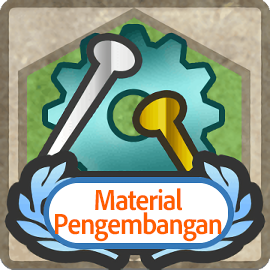
<style>
.page{position:relative;width:270px;height:270px}
.page>*{position:absolute;margin:0}
.t1{font:30px/24px "AdobeClean-Bold";letter-spacing:-0.04em;color:#ff5d00;scale:0.9 1}
</style>
<div class="page">
<p class="t1" style="left:55px;top:188px;width:167px;height:54px;text-align:center">Material<br>Pengembangan</p>
</div>
